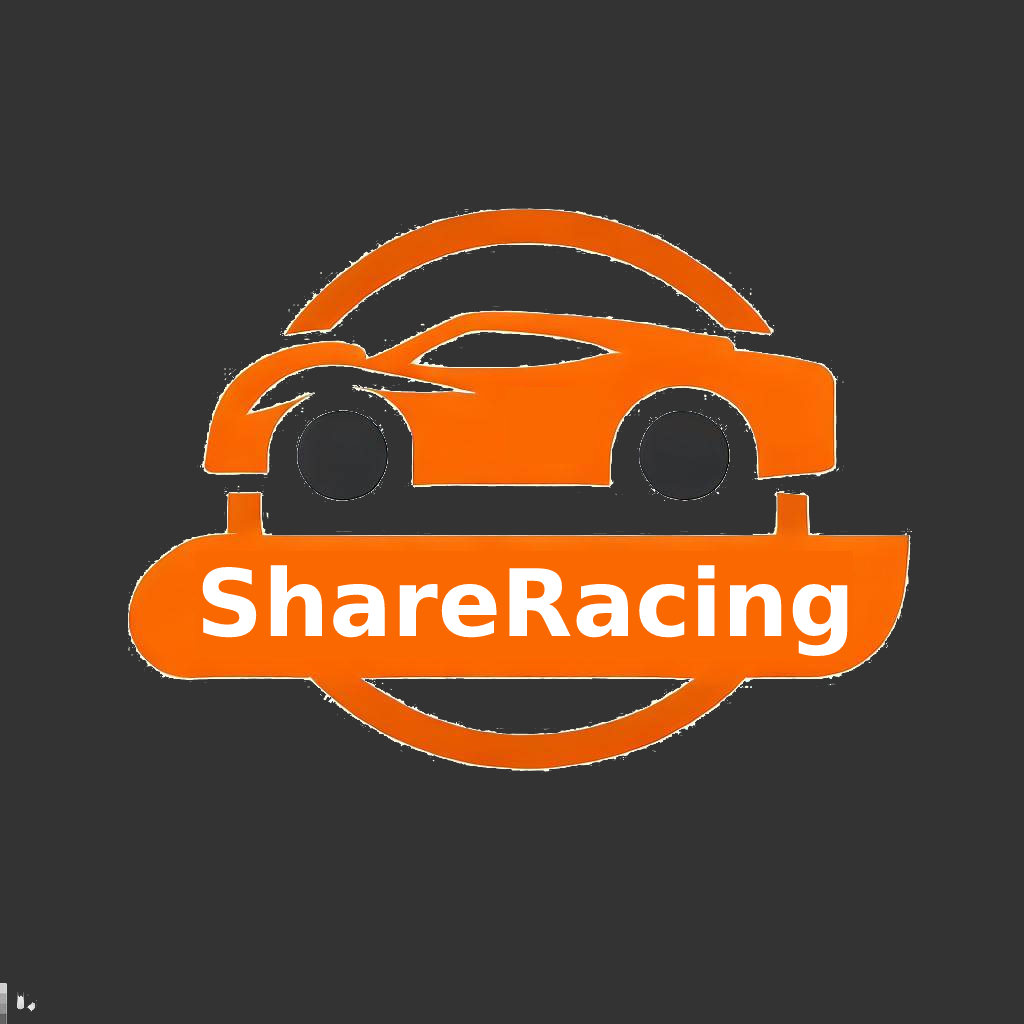
<style>
.page{position:relative;width:1024px;height:1024px;background:#333333}
.page>*{position:absolute;margin:0}
.t1{font:93px "DejaVuSans-Bold";color:#ffffff}
</style>
<div class="page">
<p class="t1" style="left:202px;top:565px;width:646px;height:92px">ShareRacing</p>
</div>
